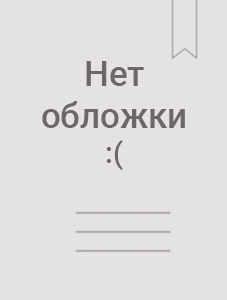
<style>
.page{position:relative;width:227px;height:300px;background:#e4e2e4}
.page>*{position:absolute;margin:0}
.t1{font:35px "Roboto-Medium";color:#6d676b}
.t2{font:29.2px "Roboto-Medium";color:#6d676b}
</style>
<div class="page">
<p class="t1" style="left:42px;top:61px;width:143px;height:109px;text-align:center">Нет<br>обложки<br><span class="t2">:(</span></p>
</div>
